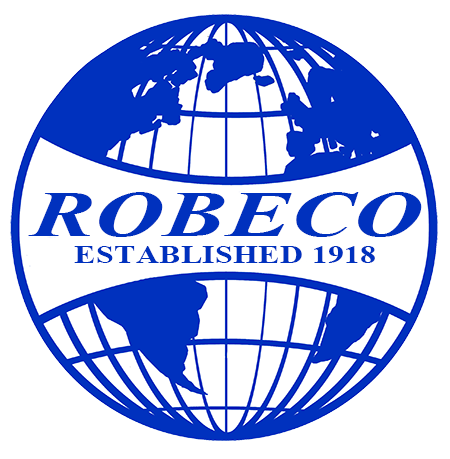
<style>
.page{position:relative;width:450px;height:459px;background:#ffffff}
.page>*{position:absolute;margin:0}
.t1{font:63.9px "TimesNewRomanPS-BoldItalicMT";color:#0031be;scale:1.49 1}
.t2{font:25.8px "TimesNewRomanPS-BoldMT";color:#0031be;scale:1.26 1}
</style>
<div class="page">
<p class="t1" style="left:28px;top:192px;width:394px;height:45px">ROBECO</p>
<p class="t2" style="left:74px;top:246px;width:301px;height:17px">ESTABLISHED 1918</p>
</div>
